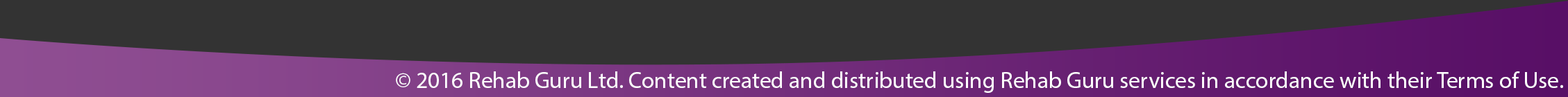
<style>
.page{position:relative;width:1568px;height:97px;background:#333333}
.page>*{position:absolute;margin:0}
.t1{font:23.1px "MyriadPro-Regular";color:#ffffff}
</style>
<div class="page">
<p class="t1" style="left:396px;top:72px;width:1167px;height:21px">© 2016 Rehab Guru Ltd. Content created and distributed using Rehab Guru services in accordance with their Terms of Use.</p>
</div>
